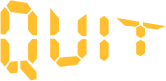
<style>
.page{position:relative;width:166px;height:81px;background:#ffffff}
.page>*{position:absolute;margin:0}
.t1{font:75px "QuartzMS";color:#ffbf2e;scale:1.06 1}
</style>
<div class="page">
<p class="t1" style="left:0px;top:0px;width:166px;height:81px">QUIT</p>
</div>
